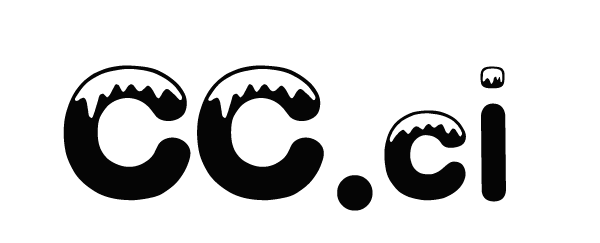
<style>
.page{position:relative;width:600px;height:243px;background:#ffffff}
.page>*{position:absolute;margin:0}
.t1{font:200px "jaffer-Regular";color:#050505}
</style>
<div class="page">
<p class="t1" style="left:63px;top:65px;width:443px;height:146px">CC.ci</p>
</div>
